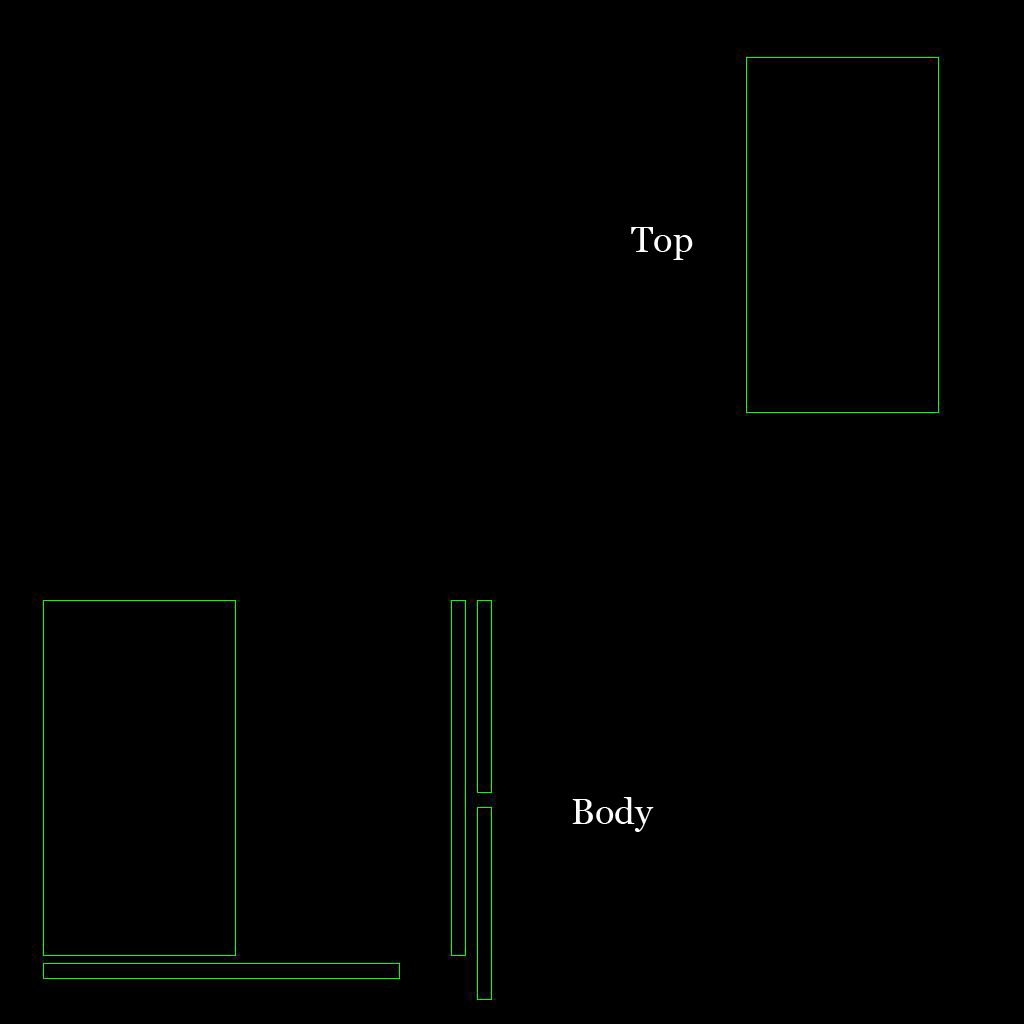
<style>
.page{position:relative;width:1024px;height:1024px;background:#000000}
.page>*{position:absolute;margin:0}
.t1{font:36px "Georgia";color:#ffffff}
</style>
<div class="page">
<p class="t1" style="left:631px;top:227px;width:62px;height:33px">Top</p>
<p class="t1" style="left:572px;top:797px;width:82px;height:35px">Body</p>
</div>
